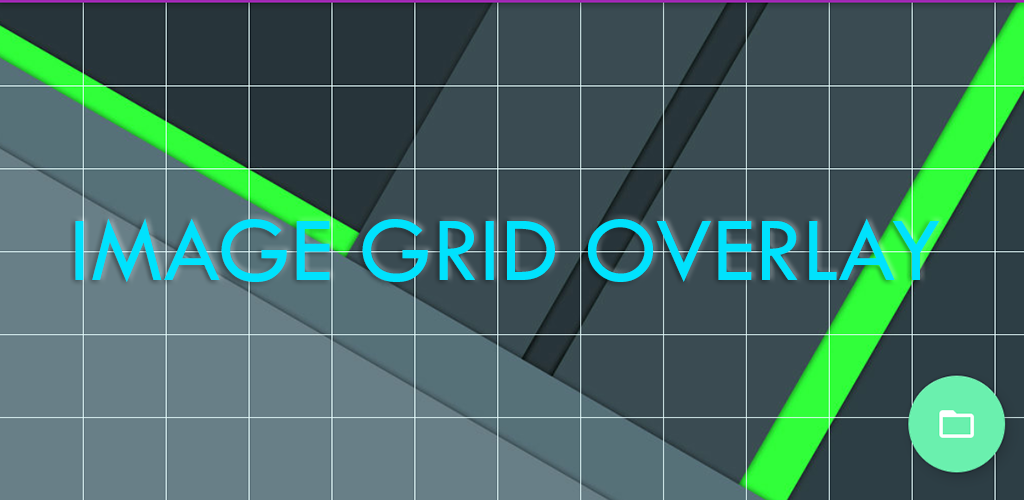
<style>
.page{position:relative;width:1024px;height:500px;background:#3a4b52}
.page>*{position:absolute;margin:0}
.t1{font:95px "TwCenMT-Regular";color:#00e2fd}
</style>
<div class="page">
<p class="t1" style="left:75px;top:218px;width:865px;height:64px">IMAGE GRID OVERLAY</p>
</div>
